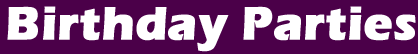
<style>
.page{position:relative;width:418px;height:54px;background:#4b0049}
.page>*{position:absolute;margin:0}
.t1{font:48px "ErasITC-Bold";color:#ffffff;font-weight:bold}
</style>
<div class="page">
<p class="t1" style="left:7px;top:6px;width:409px;height:46px">Birthday Parties</p>
</div>
